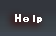
<style>
.page{position:relative;width:56px;height:36px;background:#33363d}
.page>*{position:absolute;margin:0}
.t1{font:10px "HeliosBlack";letter-spacing:0.14em;color:#ffffff}
</style>
<div class="page">
<p class="t1" style="left:15px;top:14px;width:27px;height:9px">Help</p>
</div>
